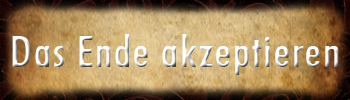
<style>
.page{position:relative;width:350px;height:100px}
.page>*{position:absolute;margin:0}
.t1{font:44px "FuturaBT-MediumCondensed";letter-spacing:0.04em}
</style>
<div class="page">
<p class="t1" style="left:12px;top:34px;width:327px;height:41px">Das Ende akzeptieren</p>
</div>
